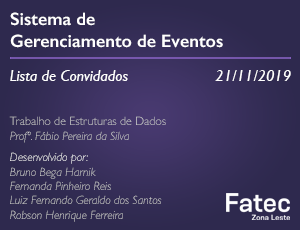
<style>
.page{position:relative;width:300px;height:230px;background:#2e294e}
.page>*{position:absolute;margin:0}
.t1{font:18px "GillSans-SemiBold";color:#ffffff}
.t2{font:16px "GillSans-Italic";color:#ffffff}
.t3{font:12px "GillSans-LightItalic";color:#cccccc}
.t4{font:12px "GillSans-Light";color:#cccccc}
.t5{font:12px "GillSans-LightItalic";color:#ffffff}
</style>
<div class="page">
<p class="t1" style="left:10px;top:12px;width:213px;height:36px">Sistema de<br>Gerenciamento de Eventos</p>
<p class="t2" style="left:10px;top:70px;width:118px;height:11px">Lista de Convidados</p>
<p class="t2" style="left:215px;top:70px;width:76px;height:11px">21/11/2019</p>
<p class="t3" style="left:9px;top:116px;width:157px;height:106px"><span class="t4">Trabalho de Estruturas de Dados<br></span>Profº. Fábio Pereira da Silva<br><br><span class="t5">Desenvolvido por:<br></span>Bruno Bega Harnik<br>Fernanda Pinheiro Reis<br>Luiz Fernando Geraldo dos Santos<br>Robson Henrique Ferreira</p>
</div>
